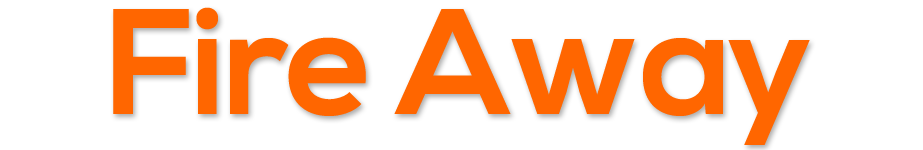
<style>
.page{position:relative;width:923px;height:150px;background:#ffffff}
.page>*{position:absolute;margin:0}
.t1{font:150px "NexaBold";letter-spacing:-0.02em;color:#ff6600}
</style>
<div class="page">
<p class="t1" style="left:113px;top:7px;width:697px;height:138px">Fire Away</p>
</div>
